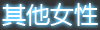
<style>
.page{position:relative;width:100px;height:30px}
.page>*{position:absolute;margin:0}
.t1{font:24px "MicrosoftYaHei";color:#ffffff}
</style>
<div class="page">
<p class="t1" style="left:2px;top:3px;width:96px;height:23px">其他女性</p>
</div>
